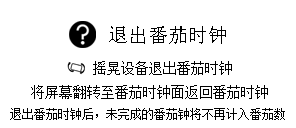
<style>
.page{position:relative;width:296px;height:128px;background:#ffffff}
.page>*{position:absolute;margin:0}
.t1{font:20px "SimSun";color:#000000}
.t2{font:14px "SimSun";color:#000000}
.t3{font:12px "SimSun";color:#000000}
</style>
<div class="page">
<p class="t1" style="left:109px;top:26px;width:117px;height:18px">退出番茄时钟</p>
<p class="t2" style="left:93px;top:61px;width:139px;height:14px">摇晃设备退出番茄时钟</p>
<p class="t2" style="left:31px;top:85px;width:237px;height:14px">将屏幕翻转至番茄时钟面返回番茄时钟</p>
<p class="t3" style="left:10px;top:108px;width:275px;height:12px">退出番茄时钟后，未完成的番茄钟将不再计入番茄数</p>
</div>
